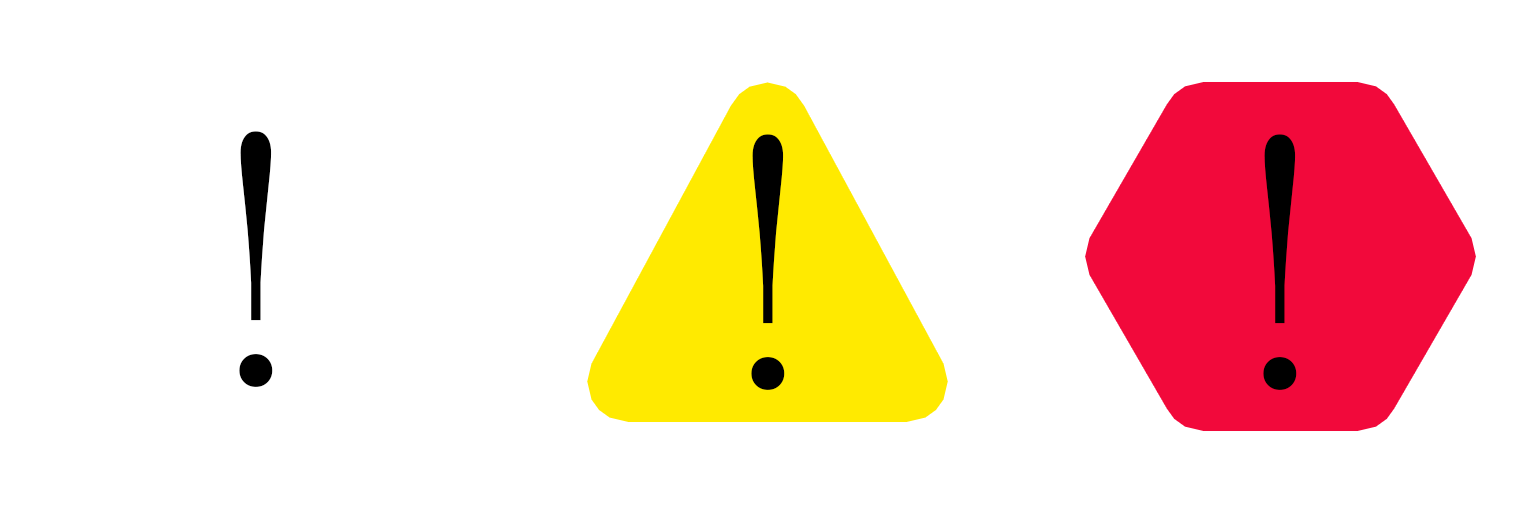
<style>
.page{position:relative;width:1536px;height:512px;background:#ffffff}
.page>*{position:absolute;margin:0}
.t1{font:300.4px "MS-Mincho";color:#000000}
</style>
<div class="page">
<p class="t1" style="left:239px;top:131px;width:34px;height:256px">!</p>
<p class="t1" style="left:751px;top:134px;width:34px;height:256px">!</p>
<p class="t1" style="left:1263px;top:134px;width:34px;height:256px">!</p>
</div>
